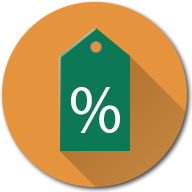
<style>
.page{position:relative;width:192px;height:192px;background:#e5943d}
.page>*{position:absolute;margin:0}
.t1{font:7.6px "MyriadPro-Regular";color:#ffffff}
</style>
<div class="page">
<p class="t1" style="left:71px;top:87px;width:49px;height:46px">%</p>
</div>
